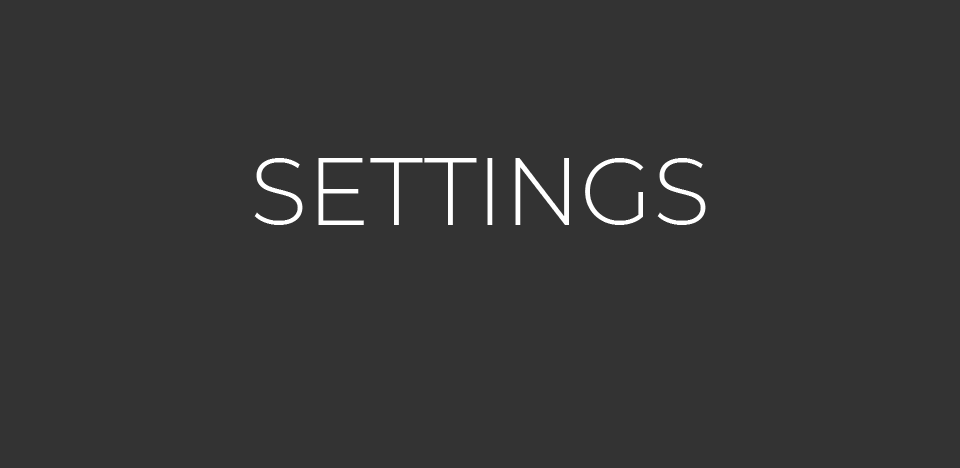
<style>
.page{position:relative;width:960px;height:468px;background:#333333}
.page>*{position:absolute;margin:0}
.t1{font:93.9px "Montserrat-Light";color:#ffffff}
</style>
<div class="page">
<p class="t1" style="left:254px;top:158px;width:452px;height:67px">SETTINGS</p>
</div>
